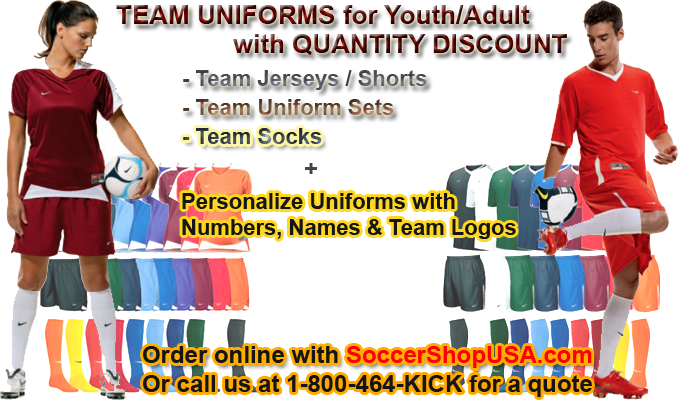
<style>
.page{position:relative;width:680px;height:400px;background:#ffffff}
.page>*{position:absolute;margin:0}
.t1{font:26px "Arial-BoldMT"}
.t2{font:22px "Arial-BoldMT"}
.t3{font:24px "Arial-BoldMT";color:#474545}
.t4{font:22px "Arial-BoldMT";color:#161515}
.t5{font:24px "Arial-BoldMT";color:#161515}
.t6{font:24px "Arial-BoldMT";color:#fc0107}
</style>
<div class="page">
<p class="t1" style="left:116px;top:5px;width:414px;height:19px">TEAM UNIFORMS for Youth/Adult</p>
<p class="t1" style="left:233px;top:34px;width:334px;height:21px">with QUANTITY DISCOUNT</p>
<p class="t2" style="left:183px;top:70px;width:244px;height:20px">- Team Jerseys / Shorts</p>
<p class="t2" style="left:183px;top:99px;width:211px;height:16px">- Team Uniform Sets</p>
<p class="t2" style="left:183px;top:128px;width:139px;height:16px">- Team Socks</p>
<p class="t3" style="left:305px;top:163px;width:12px;height:11px">+</p>
<p class="t4" style="left:182px;top:193px;width:334px;height:46px">Personalize Uniforms with<br>Numbers, Names &amp; Team Logos</p>
<p class="t5" style="left:143px;top:346px;width:449px;height:22px">Order online with <span class="t6">SoccerShopUSA.com</span></p>
<p class="t5" style="left:143px;top:375px;width:449px;height:22px">Or call us at 1-800-464-KICK for a quote</p>
</div>
